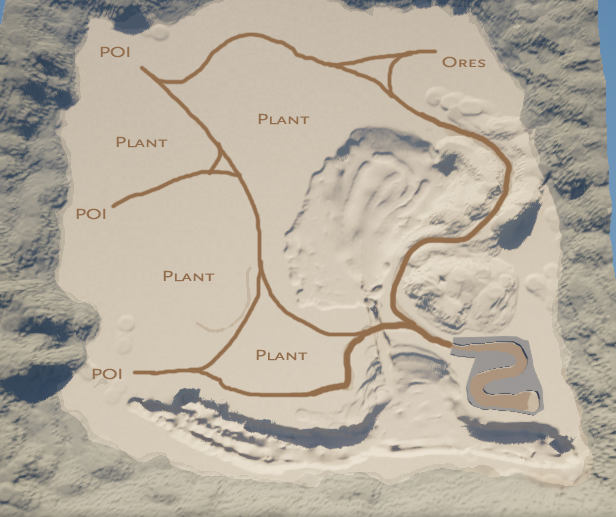
<style>
.page{position:relative;width:616px;height:517px}
.page>*{position:absolute;margin:0}
.t1{font:15.2px "ScalySansCaps";letter-spacing:-0.031em;color:#936e4d;scale:1.39 1}
</style>
<div class="page">
<p class="t1" style="left:100px;top:46px;width:30px;height:12px">POI</p>
<p class="t1" style="left:442px;top:56px;width:44px;height:12px">Ores</p>
<p class="t1" style="left:258px;top:113px;width:52px;height:12px">Plant</p>
<p class="t1" style="left:116px;top:136px;width:52px;height:12px">Plant</p>
<p class="t1" style="left:76px;top:208px;width:30px;height:12px">POI</p>
<p class="t1" style="left:163px;top:270px;width:52px;height:12px">Plant</p>
<p class="t1" style="left:256px;top:349px;width:52px;height:12px">Plant</p>
<p class="t1" style="left:92px;top:368px;width:30px;height:12px">POI</p>
</div>
